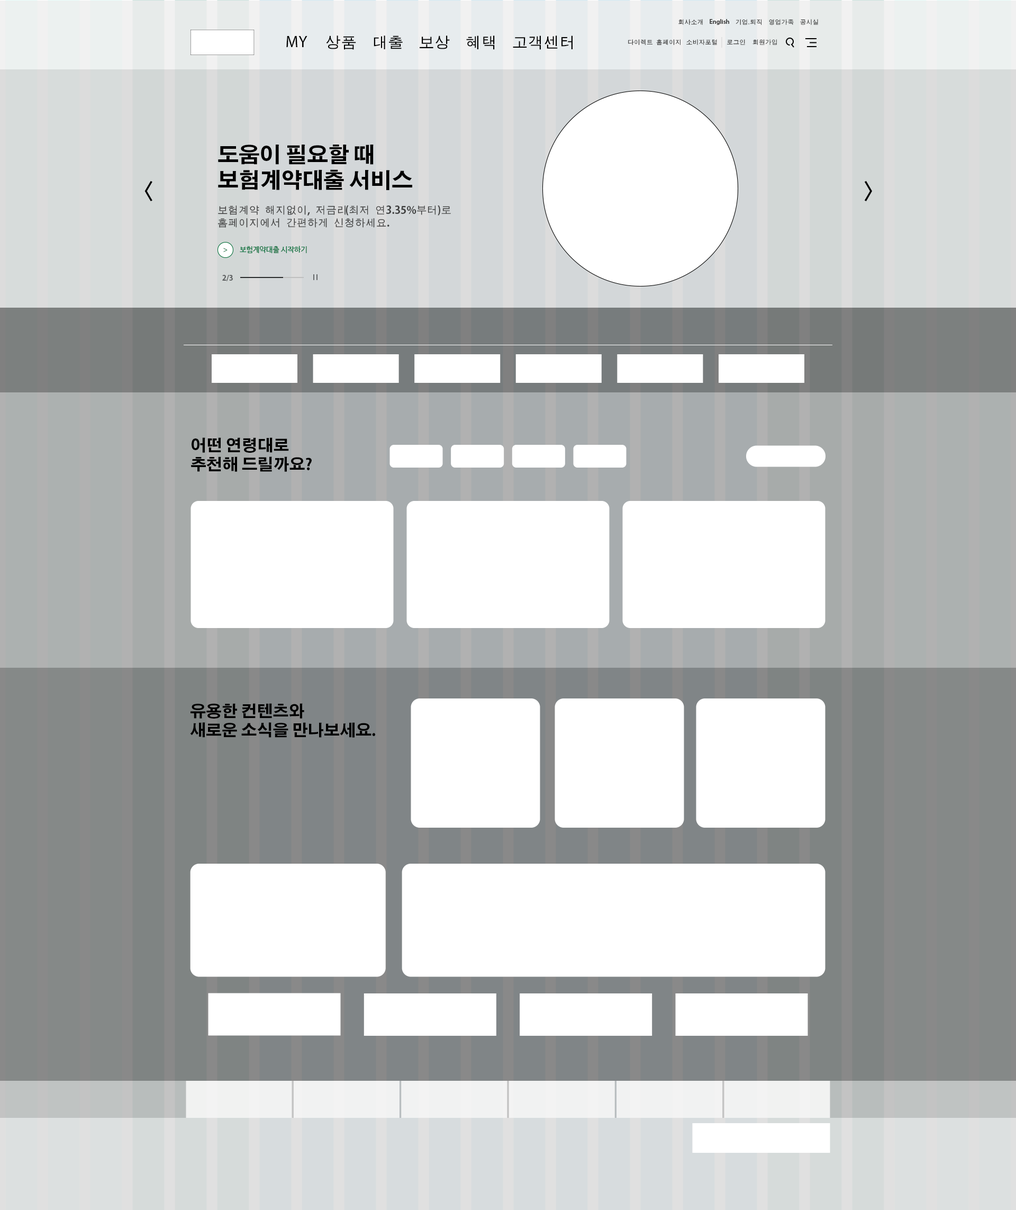
<style>
.page{position:relative;width:1016px;height:1210px;background:#ffffff}
.page>*{position:absolute;margin:0}
.t1{font:6.4px "MDotum";color:#333333;text-transform:uppercase}
.t2{font:6.4px "MyriadPro-Semibold";color:#333333}
.t3{font:6.4px "MyriadPro-Semibold";color:#333333;text-transform:uppercase}
.t4{font:6.4px "AdobeMyungjoStd-Medium";color:#333333;text-transform:uppercase}
.t5{font:15.9px "MyriadPro-Regular";color:#000000;text-transform:uppercase}
.t6{font:15.9px "MDotum";color:#000000}
.t7{font:21.2px "AdobeGothicStd-Bold";color:#000000}
.t8{font:21.2px "HaanYGodic23";color:#000000}
.t9{font:10.6px "MDotum";color:#3f3f3f}
.t10{font:10.6px "AdobeGothicStd-Bold";color:#3f3f3f}
.t11{font:7.4px "NanumBarunGothic";color:#036e38;text-transform:uppercase}
.t12{font:7.4px "MyriadPro-Regular";text-transform:uppercase}
.t13{font:7.4px "AdobeGothicStd-Bold";color:#5b5d5e}
.t14{font:15.9px "AdobeGothicStd-Bold";color:#000000}
</style>
<div class="page">
<p class="t1" style="left:679px;top:19px;width:24px;height:6px">회사소개</p>
<p class="t2" style="left:710px;top:19px;width:20px;height:6px"><span class="t3">e</span>nglish</p>
<p class="t1" style="left:736px;top:19px;width:26px;height:6px">기업<span class="t4">.</span>퇴직</p>
<p class="t1" style="left:769px;top:19px;width:25px;height:6px">영업가족</p>
<p class="t1" style="left:800px;top:19px;width:18px;height:6px">공시실</p>
<p class="t5" style="left:286px;top:36px;width:22px;height:11px">my</p>
<p class="t6" style="left:326px;top:35px;width:30px;height:15px">상품</p>
<p class="t6" style="left:374px;top:35px;width:29px;height:14px">대출</p>
<p class="t6" style="left:420px;top:35px;width:30px;height:14px">보상</p>
<p class="t6" style="left:466px;top:35px;width:29px;height:15px">혜택</p>
<p class="t6" style="left:513px;top:35px;width:60px;height:15px">고객센터</p>
<p class="t1" style="left:628px;top:39px;width:53px;height:7px">다이렉트 홈페이지</p>
<p class="t1" style="left:687px;top:39px;width:30px;height:6px">소비자포털</p>
<p class="t1" style="left:727px;top:39px;width:18px;height:6px">로그인</p>
<p class="t1" style="left:753px;top:39px;width:24px;height:6px">회원가입</p>
<p class="t7" style="left:218px;top:145px;width:194px;height:45px;text-align:justify">도움이 필요할 때<br>보험계약대출 서비스</p>
<p class="t8" style="left:145px;top:181px;width:7px;height:20px">&lt;</p>
<p class="t8" style="left:865px;top:181px;width:7px;height:20px">&gt;</p>
<p class="t9" style="left:218px;top:205px;width:233px;height:23px;text-align:justify">보험계약 해지없이<span class="t10">,</span> 저금리<span class="t10">(</span>최저 연<span class="t10">3.35%</span>부터<span class="t10">)</span>로<br>홈페이지에서 간편하게 신청하세요<span class="t10">.</span></p>
<p class="t11" style="left:240px;top:246px;width:67px;height:7px">보험계약대출 시작하기</p>
<p class="t12" style="left:223px;top:248px;width:5px;height:4px">&gt;</p>
<p class="t13" style="left:222px;top:275px;width:11px;height:6px">2/3</p>
<p class="t14" style="left:191px;top:437px;width:121px;height:35px;text-align:justify">어떤 연령대로<br>추천해 드릴까요?</p>
<p class="t14" style="left:190px;top:703px;width:185px;height:34px;text-align:justify">유용한 컨텐츠와<br>새로운 소식을 만나보세요.</p>
</div>
